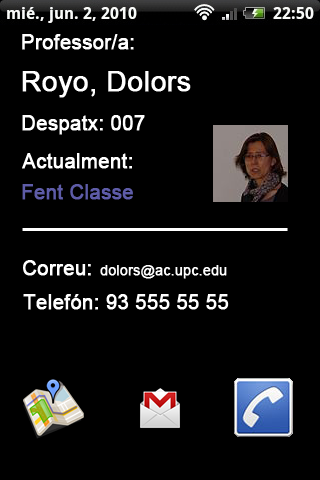
<style>
.page{position:relative;width:320px;height:480px;background:#000000}
.page>*{position:absolute;margin:0}
.t1{font:20px "ArialMT";color:#ffffff;font-weight:bold}
.t2{font:28px "ArialMT";color:#ffffff;font-weight:bold}
.t3{font:20px "ArialMT";color:#5e5ca8;font-weight:bold}
.t4{font:14px "ArialMT";color:#ffffff;font-weight:bold}
</style>
<div class="page">
<p class="t1" style="left:22px;top:34px;width:112px;height:16px">Professor/a:</p>
<p class="t2" style="left:22px;top:71px;width:169px;height:27px">Royo, Dolors</p>
<p class="t1" style="left:22px;top:115px;width:123px;height:20px">Despatx: 007</p>
<p class="t1" style="left:22px;top:153px;width:110px;height:16px">Actualment:</p>
<p class="t3" style="left:22px;top:184px;width:111px;height:16px">Fent Classe</p>
<p class="t1" style="left:23px;top:260px;width:68px;height:16px">Correu:</p>
<p class="t4" style="left:100px;top:265px;width:127px;height:14px">dolors@ac.upc.edu</p>
<p class="t1" style="left:23px;top:294px;width:206px;height:16px">Telefón: 93 555 55 55</p>
</div>
